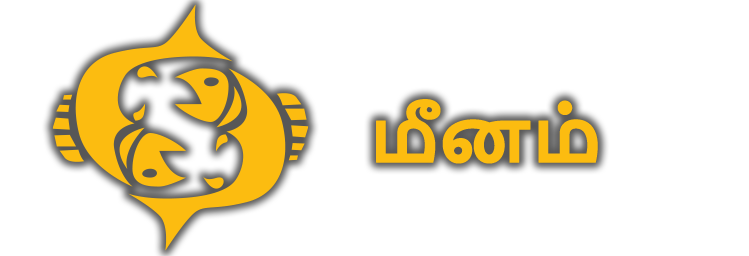
<style>
.page{position:relative;width:749px;height:256px;background:#ffffff}
.page>*{position:absolute;margin:0}
.t1{font:70.8px "NirmalaUI-Bold";letter-spacing:-0.05em;color:#fcbc10;text-transform:uppercase;font-weight:bold}
</style>
<div class="page">
<p class="t1" style="left:376px;top:99px;width:222px;height:65px">மீனம்</p>
</div>
